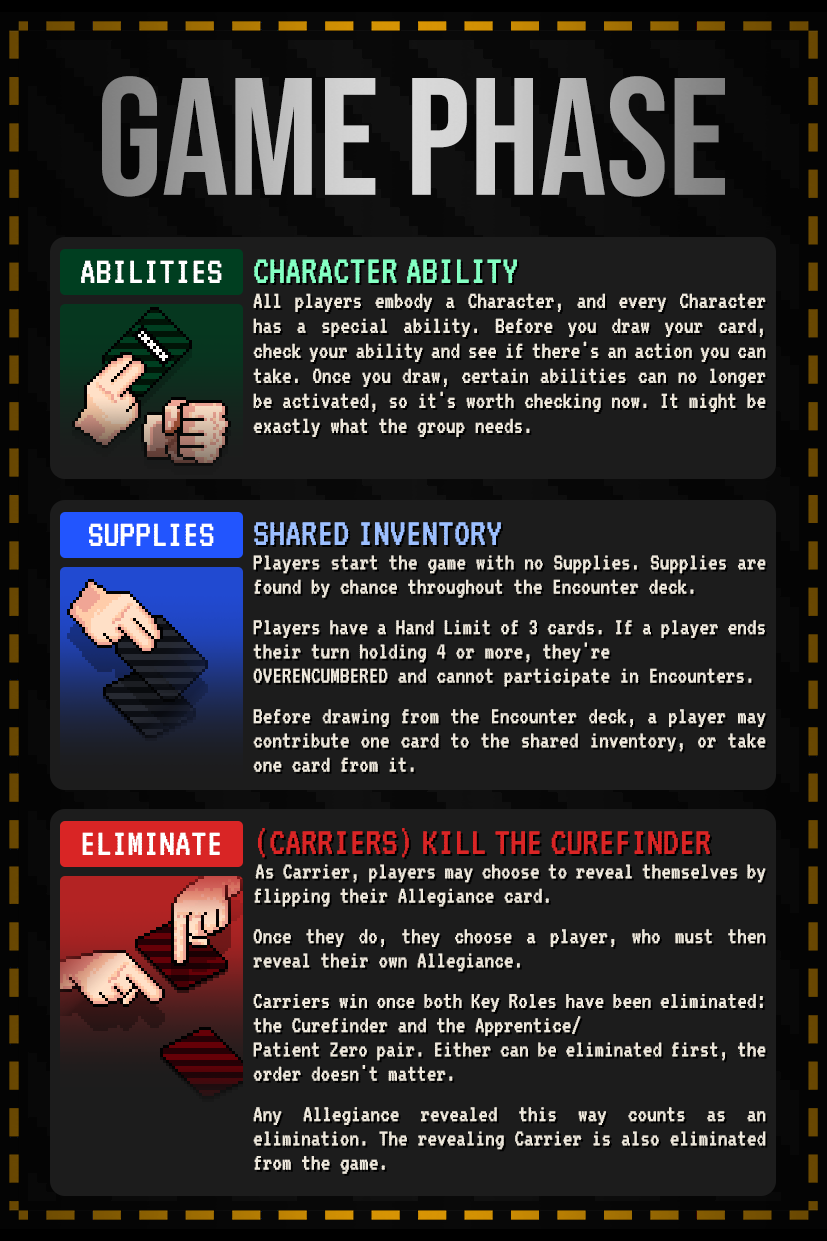
<style>
.page{position:relative;width:827px;height:1241px;background:#1c1c1c}
.page>*{position:absolute;margin:0}
.t1{font:166.7px "BebasNeue-Regular"}
.t2{font:39.7px "VT323-Regular";color:#ffffff}
.t3{font:25px/25px "VT323-Regular";color:#eee8dc;scale:0.96 1}
.t4{font:41.7px "VT323-Regular";color:#84ffc3;scale:0.96 1}
.t5{font:24.3px/24.3px "VT323-Regular";color:#eee8dc}
.t6{font:40.5px "VT323-Regular";color:#9cbfff}
.t7{font:40.5px "VT323-Regular";color:#d92525}
</style>
<div class="page">
<p class="t1" style="left:102px;top:76px;width:623px;height:121px">GAME PHASE</p>
<p class="t2" style="left:81px;top:260px;width:141px;height:23px">ABILITIES</p>
<p class="t3" style="left:253px;top:259px;width:513px;height:178px;text-align:justify"><span class="t4">CHARACTER ABILITY<br></span>All players embody a Character, and every Character has a special ability. Before you draw your card, check your ability and see if there's an action you can take. Once you draw, certain abilities can no longer be activated, so it's worth checking now. It might be exactly what the group needs.</p>
<p class="t2" style="left:89px;top:523px;width:125px;height:23px">SUPPLIES</p>
<p class="t5" style="left:253px;top:522px;width:513px;height:250px;text-align:justify"><span class="t6">SHARED INVENTORY<br></span>Players start the game with no Supplies. Supplies are found by chance throughout the Encounter deck.<br><br>Players have a Hand Limit of 3 cards. If a player ends their turn holding 4 or more, they're<br>OVERENCUMBERED and cannot participate in Encounters.<br><br>Before drawing from the Encounter deck, a player may contribute one card to the shared inventory, or take one card from it.</p>
<p class="t2" style="left:82px;top:832px;width:138px;height:23px">ELIMINATE</p>
<p class="t5" style="left:253px;top:828px;width:513px;height:346px;text-align:justify"><span class="t7">(CARRIERS) KILL THE CUREFINDER<br> </span>As Carrier, players may choose to reveal themselves by flipping their Allegiance card.<br><br>Once they do, they choose a player, who must then reveal their own Allegiance.<br><br>Carriers win once both Key Roles have been eliminated: the Curefinder and the Apprentice/<br>Patient Zero pair. Either can be eliminated first, the order doesn't matter.<br><br>Any Allegiance revealed this way counts as an elimination. The revealing Carrier is also eliminated from the game.</p>
</div>
